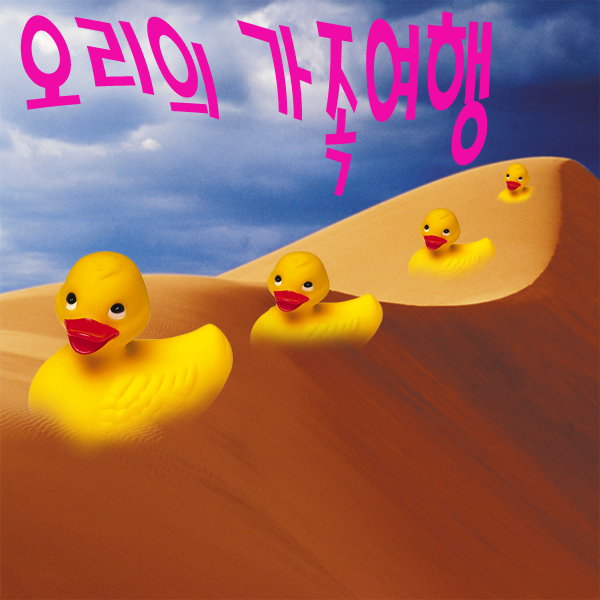
<style>
.page{position:relative;width:600px;height:600px}
.page>*{position:absolute;margin:0}
.t1{font:163.6px "MagicR-HM";color:#f00ba7;scale:0.51 1}
</style>
<div class="page">
<p class="t1" style="left:20px;top:11px;width:472px;height:186px">오리의 가족여행</p>
</div>
